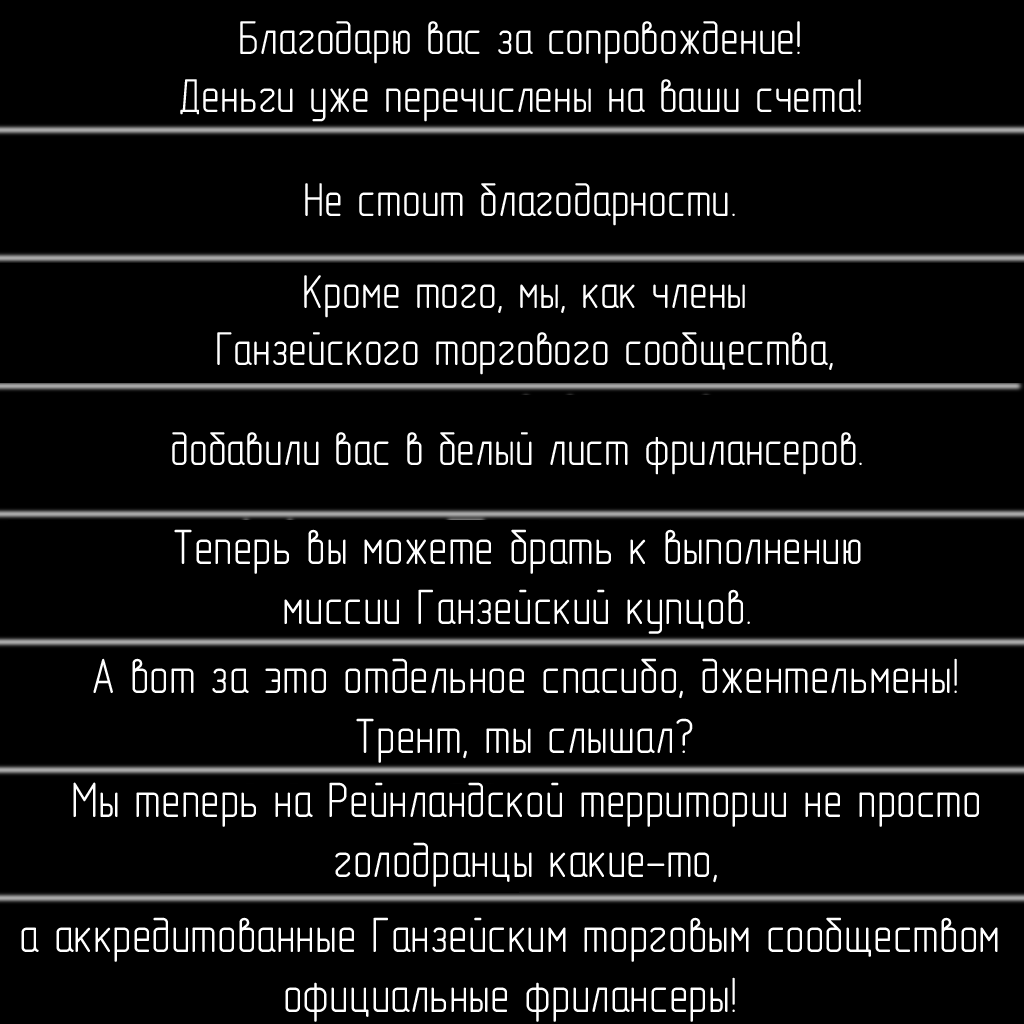
<style>
.page{position:relative;width:1024px;height:1024px;background:#000000}
.page>*{position:absolute;margin:0}
.t1{font:48px "GOST-2.304-81typeA";color:#ffffff}
.t2{font:50px "GOST-2.304-81typeA";color:#ffffff}
</style>
<div class="page">
<p class="t1" style="left:180px;top:21px;width:681px;height:101px;text-align:center">Благодарю вас за сопровождение!<br>Деньги уже перечислены на ваши счета!</p>
<p class="t1" style="left:305px;top:183px;width:430px;height:43px">Не стоит благодарности.</p>
<p class="t1" style="left:217px;top:275px;width:616px;height:100px;text-align:center">Кроме того, мы, как члены<br>Ганзейского торгового сообщества,</p>
<p class="t1" style="left:172px;top:432px;width:690px;height:43px">добавили вас в белый лист фрилансеров.</p>
<p class="t2" style="left:174px;top:529px;width:687px;height:105px;text-align:center">Теперь вы можете брать к выполнению<br>миссии Ганзейский купцов.</p>
<p class="t2" style="left:93px;top:658px;width:864px;height:105px;text-align:center">А вот за это отдельное спасибо, джентельмены!<br>Трент, ты слышал?</p>
<p class="t2" style="left:73px;top:782px;width:906px;height:105px;text-align:center">Мы теперь на Рейнландской территории не просто<br>голодранцы какие-то,</p>
<p class="t2" style="left:21px;top:917px;width:977px;height:105px;text-align:center">а аккредитованные Ганзейским торговым сообществом<br>официальные фрилансеры!</p>
</div>
